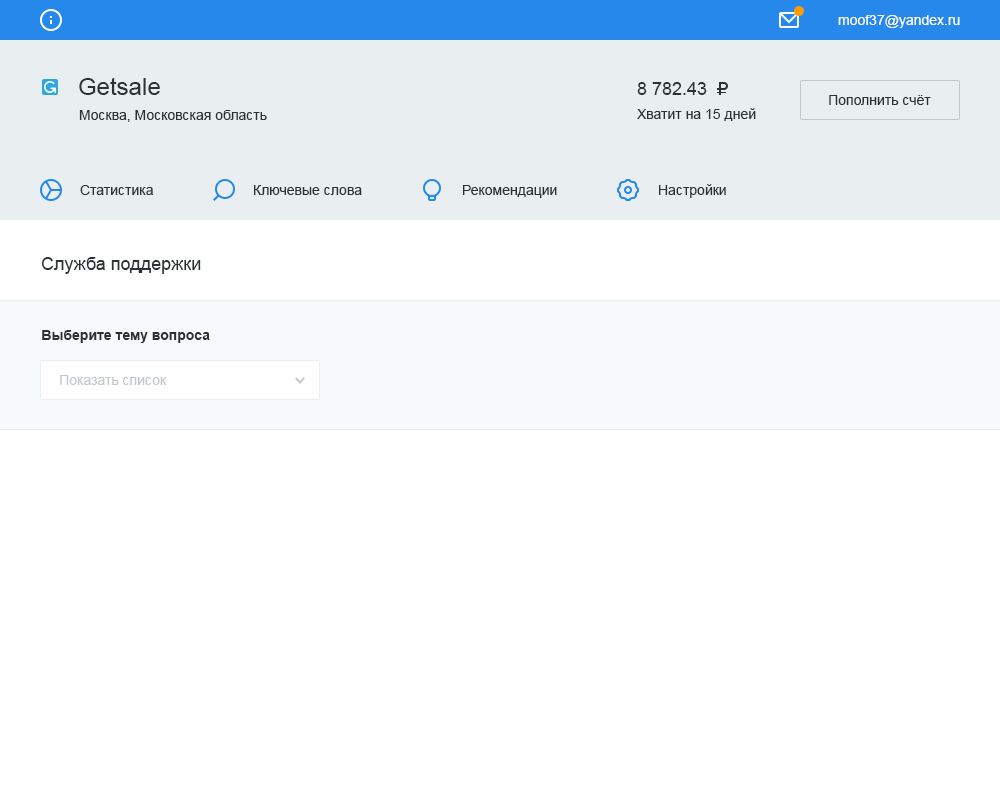
<style>
.page{position:relative;width:1000px;height:800px;background:#ffffff}
.page>*{position:absolute;margin:0}
.t1{font:14px "ArialMT";color:#ffffff}
.t2{font:24px "ArialMT";color:#2c3133}
.t3{font:18px "ArialMT";color:#2c3133}
.t4{font:14px "ArialMT";color:#2c3133}
.t5{font:14px "Arial-BoldMT";color:#2c3133}
.t6{font:14px "ArialMT";color:#c3c8cc}
</style>
<div class="page">
<p class="t1" style="left:838px;top:15px;width:122px;height:13px">moof37@yandex.ru</p>
<p class="t2" style="left:79px;top:77px;width:81px;height:18px">Getsale</p>
<p class="t3" style="left:637px;top:82px;width:70px;height:13px">8 782.43</p>
<p class="t4" style="left:829px;top:95px;width:102px;height:10px">Пополнить счёт</p>
<p class="t4" style="left:79px;top:110px;width:188px;height:12px">Москва, Московская область</p>
<p class="t4" style="left:637px;top:108px;width:119px;height:13px">Хватит на 15 дней</p>
<p class="t4" style="left:80px;top:185px;width:73px;height:10px">Статистика</p>
<p class="t4" style="left:254px;top:185px;width:108px;height:10px">Ключевые слова</p>
<p class="t4" style="left:463px;top:185px;width:94px;height:13px">Рекомендации</p>
<p class="t4" style="left:659px;top:184px;width:67px;height:14px">Настройки</p>
<p class="t3" style="left:41px;top:257px;width:160px;height:17px">Служба поддержки</p>
<p class="t5" style="left:42px;top:330px;width:168px;height:13px">Выберите тему вопроса</p>
<p class="t6" style="left:60px;top:375px;width:107px;height:10px">Показать список</p>
</div>
